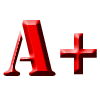
<style>
.page{position:relative;width:100px;height:100px;background:#ffffff}
.page>*{position:absolute;margin:0}
.t1{font:75px "StencilStd"}
</style>
<div class="page">
<p class="t1" style="left:3px;top:20px;width:94px;height:56px">A+</p>
</div>
